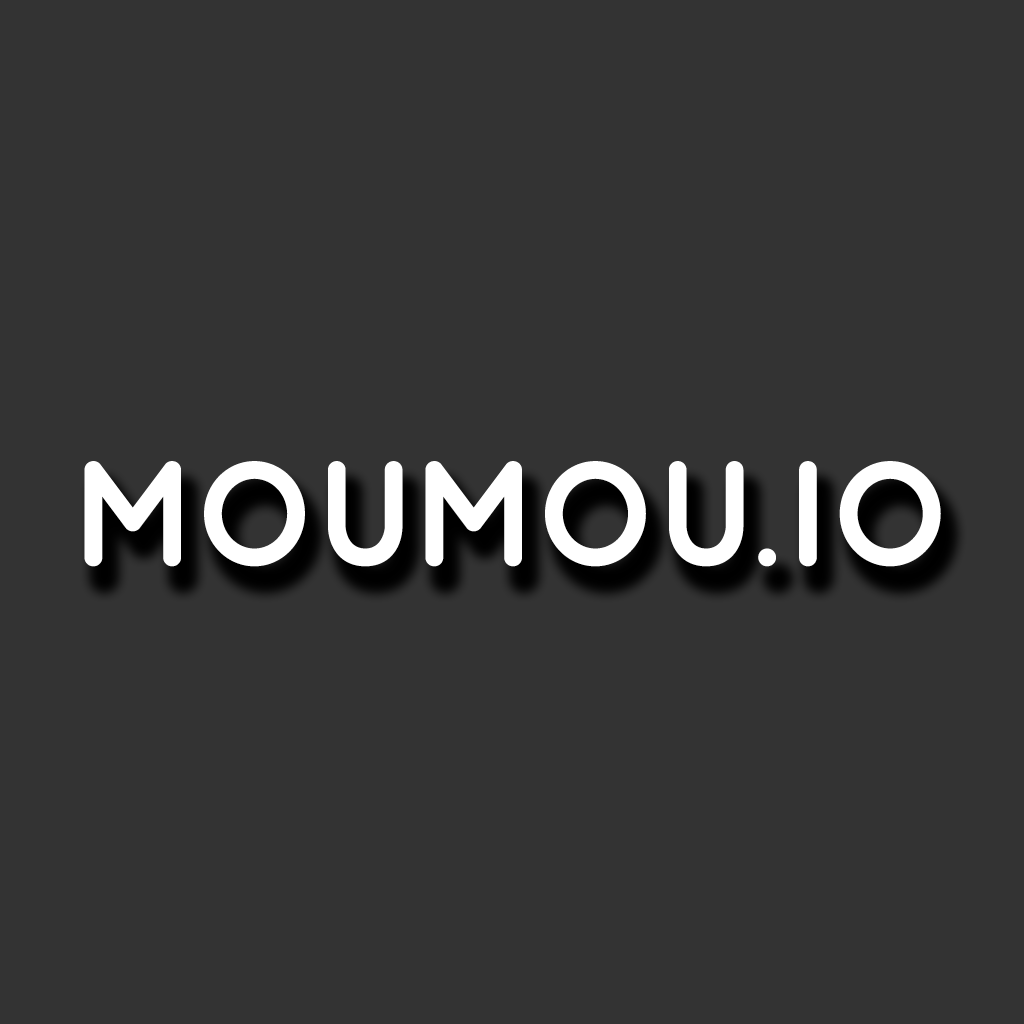
<style>
.page{position:relative;width:1024px;height:1024px;background:#333333}
.page>*{position:absolute;margin:0}
.t1{font:150px "Odin-Bold";letter-spacing:0.075em;color:#ffffff;text-transform:uppercase}
</style>
<div class="page">
<p class="t1" style="left:84px;top:461px;width:857px;height:106px">moumou.io</p>
</div>
